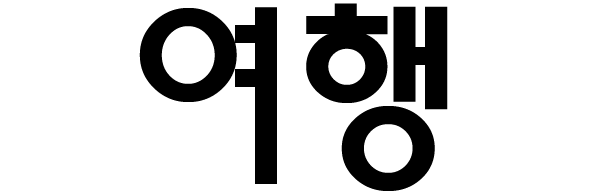
<style>
.page{position:relative;width:603px;height:191px;background:#ffffff}
.page>*{position:absolute;margin:0}
.t1{font:200px "MoeumTR-HM";color:#000000}
</style>
<div class="page">
<p class="t1" style="left:139px;top:3px;width:309px;height:188px">여행</p>
</div>
